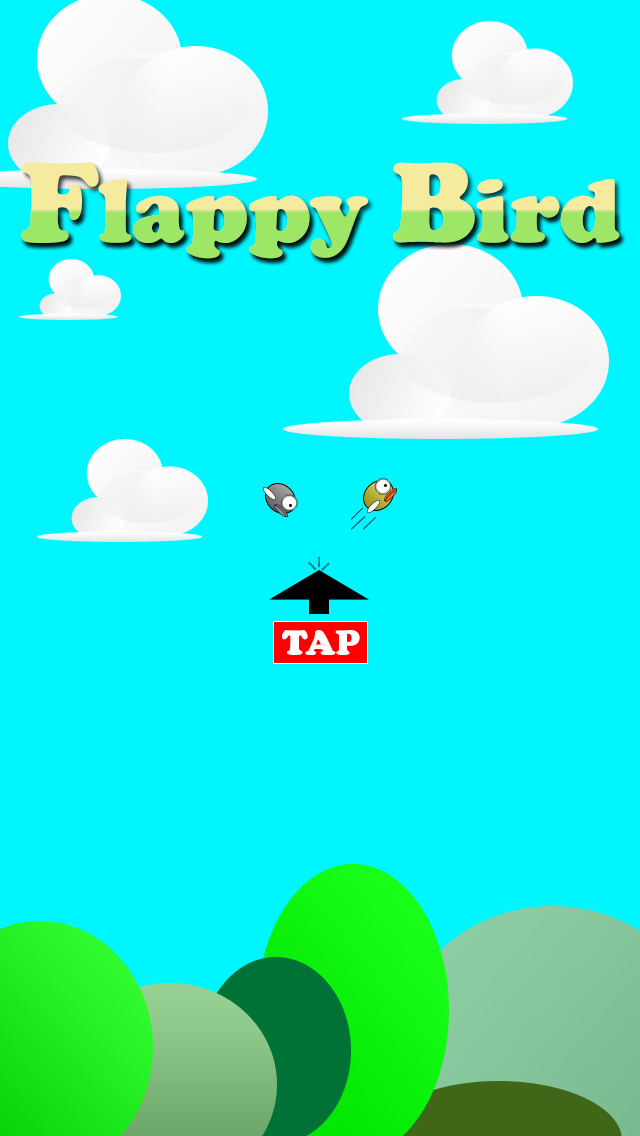
<style>
.page{position:relative;width:640px;height:1136px;background:#00f6ff}
.page>*{position:absolute;margin:0}
.t1{font:94.2px "CooperBlack"}
.t2{font:117.8px "CooperBlack"}
.t3{font:36px "CooperBlack";color:#fdfbfb}
</style>
<div class="page">
<p class="t1" style="left:21px;top:162px;width:599px;height:97px"><span class="t2">F</span>lappy <span class="t2">B</span>ird</p>
<p class="t1" style="left:21px;top:162px;width:599px;height:97px"><span class="t2">F</span>lappy <span class="t2">B</span>ird</p>
<p class="t3" style="left:282px;top:630px;width:78px;height:25px">TAP</p>
</div>
